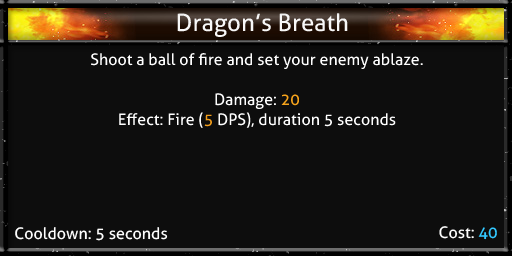
<style>
.page{position:relative;width:512px;height:256px;background:#0d0d0d}
.page>*{position:absolute;margin:0}
.t1{font:24px "Aller";color:#f8f8f8}
.t2{font:16px/20px "Aller";color:#fefefe}
.t3{font:16px/20px "Aller";color:#f4a21b}
.t4{font:16px/20px "Aller";color:#f29d1a}
.t5{font:16px "Aller";color:#fefefe}
.t6{font:16px "Aller";color:#33c8ff}
</style>
<div class="page">
<p class="t1" style="left:177px;top:13px;width:171px;height:24px">Dragon’s Breath</p>
<p class="t2" style="left:91px;top:53px;width:332px;height:75px;text-align:center">Shoot a ball of fire and set your enemy ablaze.<br><br>Damage: <span class="t3">20<br></span>Effect: Fire (<span class="t4">5</span> DPS), duration 5 seconds</p>
<p class="t5" style="left:15px;top:227px;width:153px;height:14px">Cooldown: 5 seconds</p>
<p class="t5" style="left:439px;top:226px;width:58px;height:14px">Cost: <span class="t6">40</span></p>
</div>
